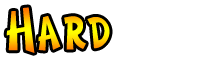
<style>
.page{position:relative;width:203px;height:60px;background:#ffffff}
.page>*{position:absolute;margin:0}
.t1{font:48px "CosmicTwoPlain"}
</style>
<div class="page">
<p class="t1" style="left:6px;top:7px;width:104px;height:46px">Hard</p>
</div>
